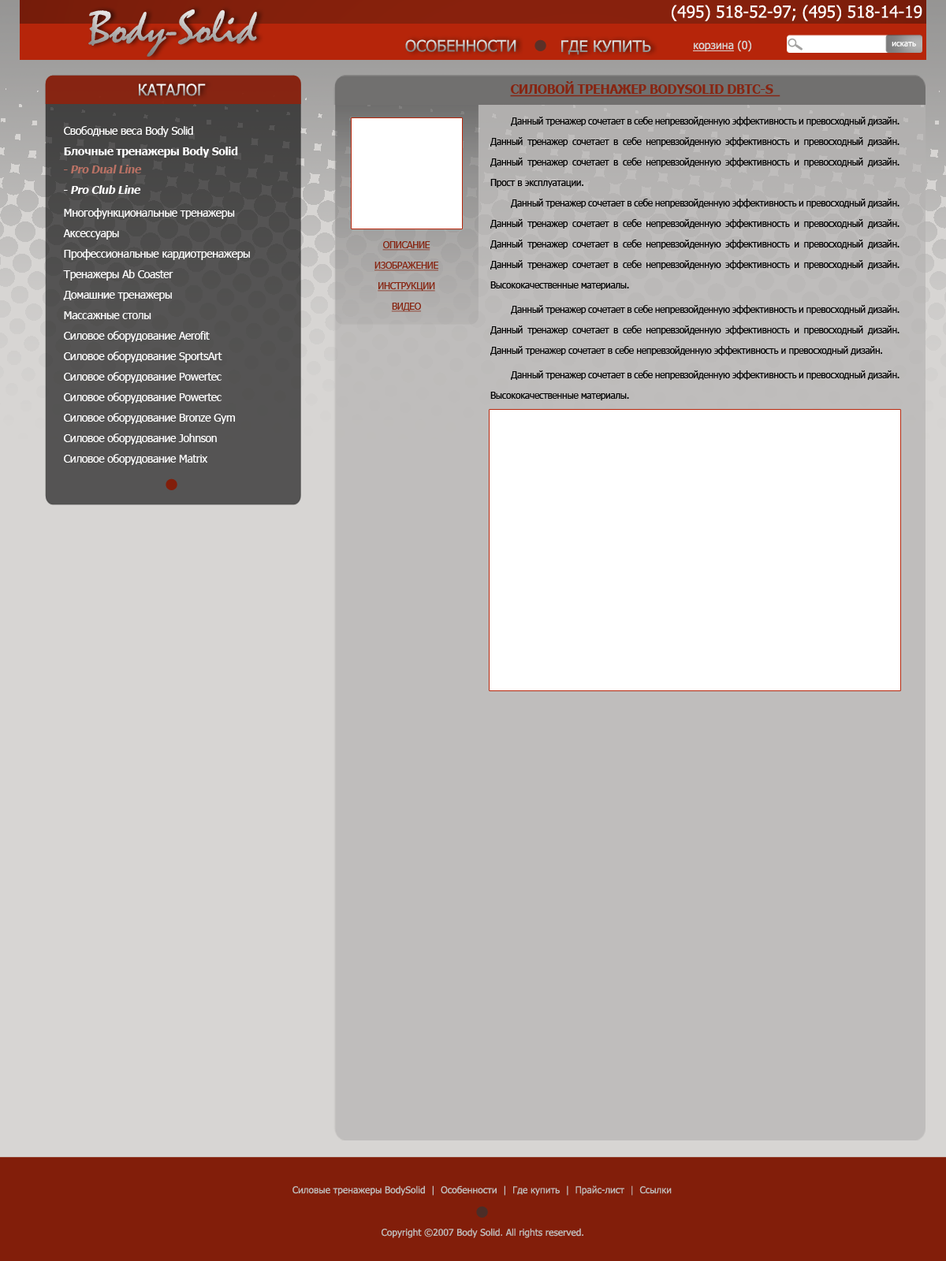
<style>
.page{position:relative;width:946px;height:1261px;background:#bfbdbc}
.page>*{position:absolute;margin:0}
.t1{font:16.5px "Tahoma";color:#ffffff}
.t2{font:47.3px "Mistral"}
.t3{font:15.8px "Tahoma"}
.t4{font:11px "Tahoma";color:#d7d5d3;text-decoration:underline}
.t5{font:11px "Tahoma";color:#d7d5d3}
.t6{font:7.9px "Tahoma";letter-spacing:0.01em;color:#ffffff}
.t7{font:12.6px "Tahoma-Bold";letter-spacing:-0.025em;color:#872512;text-transform:uppercase;text-decoration:underline}
.t8{font:9.5px/20.5px "Tahoma";letter-spacing:-0.025em;color:#000000}
.t9{font:11px/20.5px "Tahoma";letter-spacing:-0.025em;color:#ffffff}
.t10{font:11px/20.5px "Tahoma-Bold";letter-spacing:-0.025em;color:#ffffff}
.t11{font:11px/20.5px "Tahoma-Bold";letter-spacing:-0.025em;color:#b87164;font-style:italic}
.t12{font:11px/20.5px "Tahoma-Bold";letter-spacing:-0.025em;color:#ffffff;font-style:italic}
.t13{font:9.5px/20.5px "Tahoma";letter-spacing:-0.025em;color:#872512;text-transform:uppercase;text-decoration:underline}
.t14{font:9.5px "Tahoma";color:#bfbdbc}
</style>
<div class="page">
<p class="t1" style="left:671px;top:5px;width:251px;height:16px">(495) 518-52-97; (495) 518-14-19</p>
<p class="t2" style="left:88px;top:9px;width:169px;height:48px">Body-Solid</p>
<p class="t3" style="left:405px;top:39px;width:111px;height:13px">ОСОБЕННОСТИ</p>
<p class="t3" style="left:561px;top:40px;width:90px;height:15px">ГДЕ КУПИТЬ</p>
<p class="t4" style="left:693px;top:40px;width:58px;height:12px">корзина<span class="t5"> (0)</span></p>
<p class="t6" style="left:891px;top:42px;width:25px;height:4px">искать</p>
<p class="t3" style="left:139px;top:84px;width:67px;height:12px">КАТАЛОГ</p>
<p class="t7" style="left:510px;top:81px;width:270px;height:16px">Силовой тренажер BodySolid DBTC-S</p>
<p class="t8" style="left:490px;top:117px;width:409px;height:283px;text-align:justify">Данный тренажер сочетает в себе непревзойденную эффективность и превосходный дизайн. Данный тренажер сочетает в себе непревзойденную эффективность и превосходный дизайн. Данный тренажер сочетает в себе непревзойденную эффективность и превосходный дизайн. Прост в эксплуатации.<br> Данный тренажер сочетает в себе непревзойденную эффективность и превосходный дизайн. Данный тренажер сочетает в себе непревзойденную эффективность и превосходный дизайн. Данный тренажер сочетает в себе непревзойденную эффективность и превосходный дизайн. Данный тренажер сочетает в себе непревзойденную эффективность и превосходный дизайн. Высококачественные материалы.<br> Данный тренажер сочетает в себе непревзойденную эффективность и превосходный дизайн. Данный тренажер сочетает в себе непревзойденную эффективность и превосходный дизайн. Данный тренажер сочетает в себе непревзойденную эффективность и превосходный дизайн. <br> Данный тренажер сочетает в себе непревзойденную эффективность и превосходный дизайн. Высококачественные материалы.</p>
<p class="t9" style="left:63px;top:126px;width:187px;height:339px">Свободные веса Body Solid<br><span class="t10">Блочные тренажеры Body Solid<br><br>    <br></span>Многофункциональные тренажеры<br>Аксессуары<br>Профессиональные кардиотренажеры<br>Тренажеры Ab Coaster<br>Домашние тренажеры<br>Массажные столы<br>Силовое оборудование Aerofit <br>Силовое оборудование SportsArt<br>Силовое оборудование Powertec<br>Силовое оборудование Powertec<br>Силовое оборудование Bronze Gym<br>Cиловое оборудование Johnson<br>Силовое оборудование Matrix</p>
<p class="t11" style="left:64px;top:165px;width:78px;height:29px">- Pro Dual Line<br><span class="t12">- Pro Club Line</span></p>
<p class="t13" style="left:374px;top:241px;width:64px;height:71px;text-align:center">Описание<br>Изображение<br>Инструкции<br>Видео</p>
<p class="t14" style="left:292px;top:1185px;width:379px;height:11px">Силовые тренажеры BodySolid  |  Особенности  |  Где купить  |  Прайс-лист  |  Ссылки</p>
<p class="t14" style="left:381px;top:1228px;width:202px;height:10px">Copyright ©2007 Body Solid. All rights reserved.</p>
</div>
